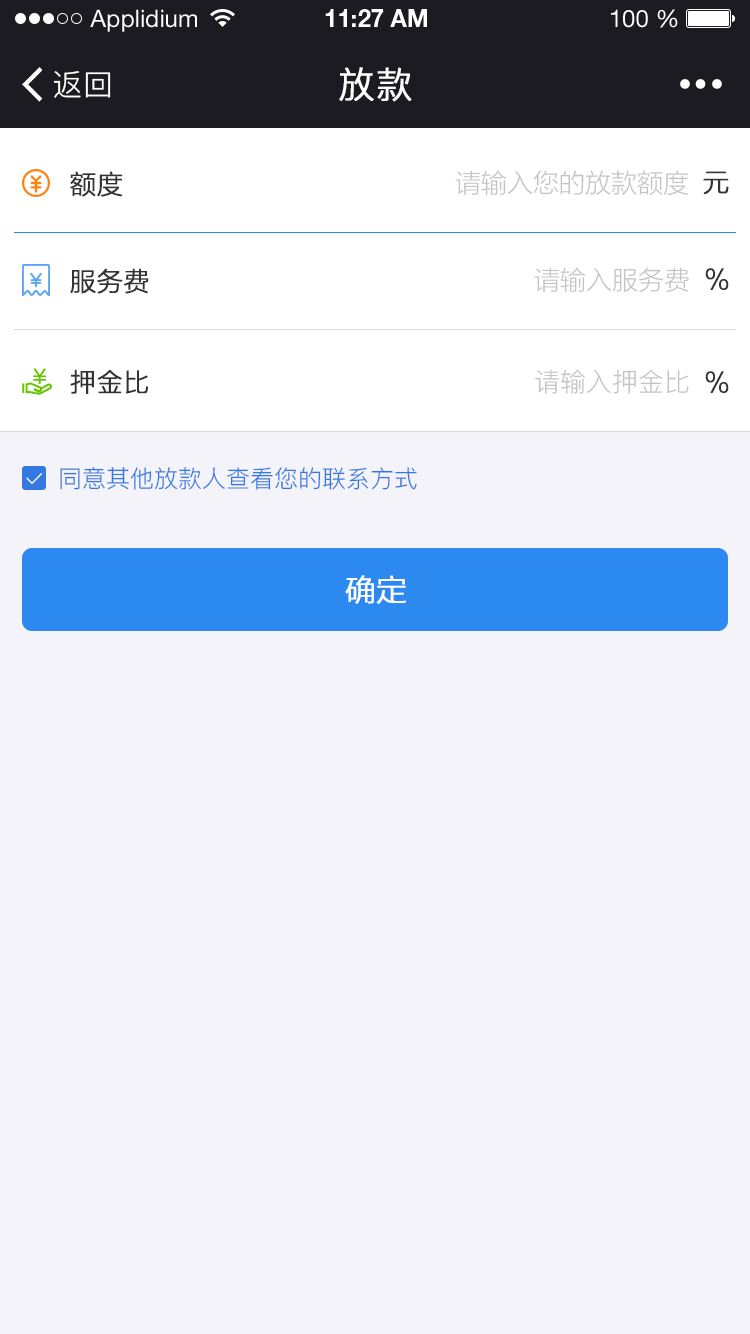
<style>
.page{position:relative;width:750px;height:1334px;background:#f4f3f9}
.page>*{position:absolute;margin:0}
.t1{font:24px "HelveticaNeueLTStd-Roman";color:#ffffff}
.t2{font:24px "HelveticaNeueLTStd-Bd";color:#ffffff}
.t3{font:30px "PingFang-SC-Regular";letter-spacing:0.025em;color:#ffffff}
.t4{font:36px "PingFang-SC-Regular";letter-spacing:0.025em;color:#ffffff;font-weight:bold}
.t5{font:26px "FZLTXHK--GBK1-0";color:#333333;font-weight:bold}
.t6{font:26px "FZLTXHK--GBK1-0";color:#c4c4c4}
.t7{font:26px "PingFang-SC-Regular";color:#333333;font-weight:bold}
.t8{font:26px "PingFang-SC-Regular";color:#c4c4c4}
.t9{font:24px "PingFang-SC-Regular";color:#3479e1}
.t10{font:30px "FZLTXHK--GBK1-0";color:#ffffff;font-weight:bold}
</style>
<div class="page">
<p class="t1" style="left:90px;top:9px;width:107px;height:23px">Applidium</p>
<p class="t2" style="left:325px;top:9px;width:102px;height:18px">11:27 AM</p>
<p class="t1" style="left:611px;top:9px;width:67px;height:19px">100 %</p>
<p class="t3" style="left:53px;top:71px;width:58px;height:27px">返回</p>
<p class="t4" style="left:339px;top:67px;width:73px;height:35px">放款</p>
<p class="t5" style="left:70px;top:171px;width:53px;height:26px">额度</p>
<p class="t6" style="left:455px;top:170px;width:233px;height:26px">请输入您的放款额度</p>
<p class="t5" style="left:703px;top:171px;width:26px;height:24px">元</p>
<p class="t5" style="left:70px;top:268px;width:79px;height:26px">服务费</p>
<p class="t6" style="left:534px;top:267px;width:155px;height:26px">请输入服务费</p>
<p class="t5" style="left:705px;top:268px;width:24px;height:22px">%</p>
<p class="t7" style="left:70px;top:369px;width:78px;height:25px">押金比</p>
<p class="t8" style="left:535px;top:369px;width:154px;height:25px">请输入押金比</p>
<p class="t5" style="left:705px;top:371px;width:24px;height:22px">%</p>
<p class="t9" style="left:60px;top:467px;width:357px;height:23px">同意其他放款人查看您的联系方式</p>
<p class="t10" style="left:345px;top:575px;width:61px;height:29px">确定</p>
</div>
